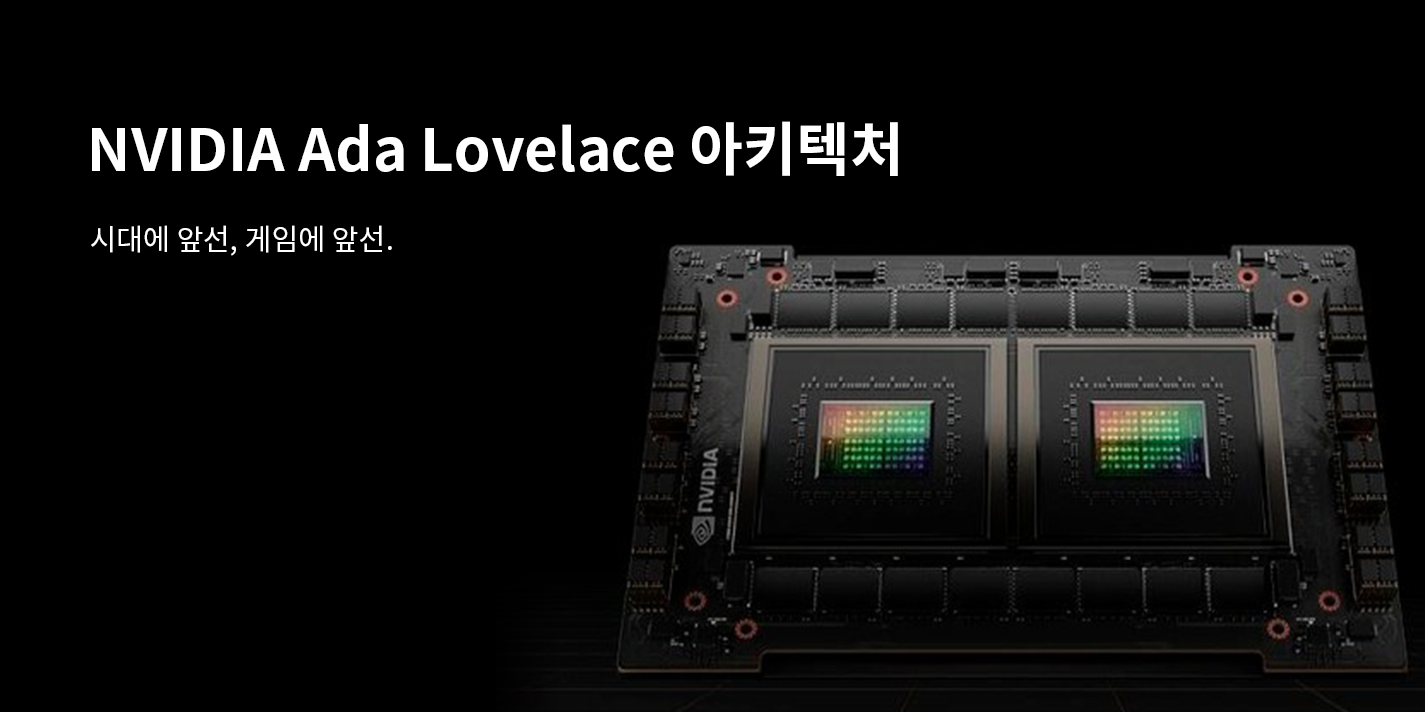
<style>
.page{position:relative;width:1425px;height:712px;background:#000000}
.page>*{position:absolute;margin:0}
.t1{font:58.3px "NotoSansKR-Bold";color:#ffffff}
.t2{font:29.2px "NotoSansKR-Regular";color:#ffffff}
</style>
<div class="page">
<p class="t1" style="left:92px;top:121px;width:806px;height:55px">NVIDIA Ada Lovelace 아키텍처</p>
<p class="t2" style="left:91px;top:225px;width:301px;height:31px">시대에 앞선, 게임에 앞선.</p>
</div>
